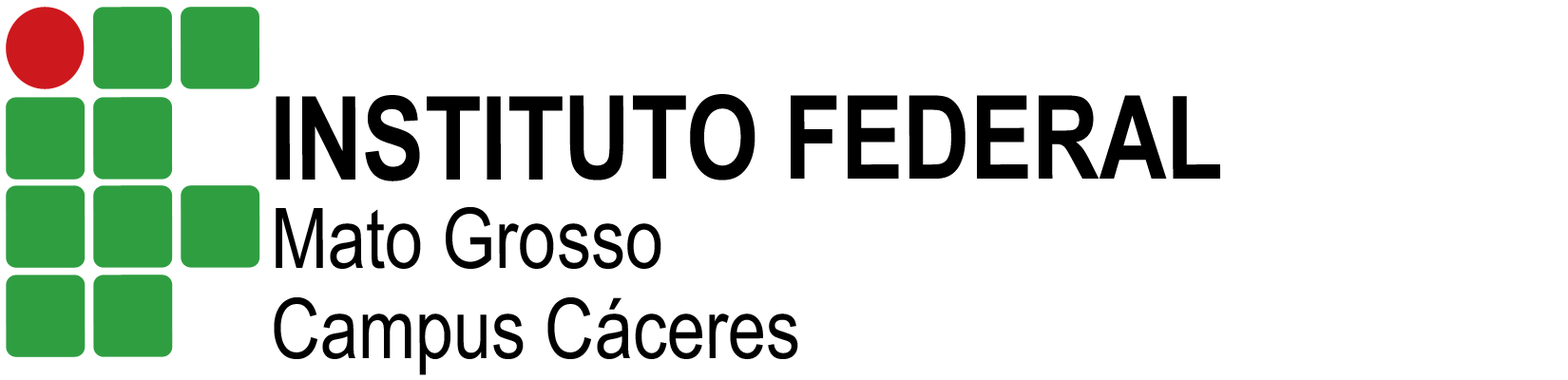
<style>
.page{position:relative;width:1568px;height:380px;background:#ffffff}
.page>*{position:absolute;margin:0}
.t1{font:115.9px "ArialNarrow-Bold";color:#000000}
.t2{font:83.6px "ArialNarrow";color:#000000}
</style>
<div class="page">
<p class="t1" style="left:276px;top:94px;width:944px;height:88px">INSTITUTO FEDERAL</p>
<p class="t2" style="left:276px;top:207px;width:385px;height:62px">Mato Grosso</p>
<p class="t2" style="left:274px;top:297px;width:524px;height:78px">Campus Cáceres</p>
</div>
